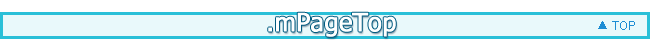
<style>
.page{position:relative;width:650px;height:47px;background:#ffffff}
.page>*{position:absolute;margin:0}
.t1{font:25px "Tahoma";color:#ffffff;font-weight:bold}
</style>
<div class="page">
<p class="t1" style="left:268px;top:12px;width:128px;height:25px">.mPageTop</p>
</div>
